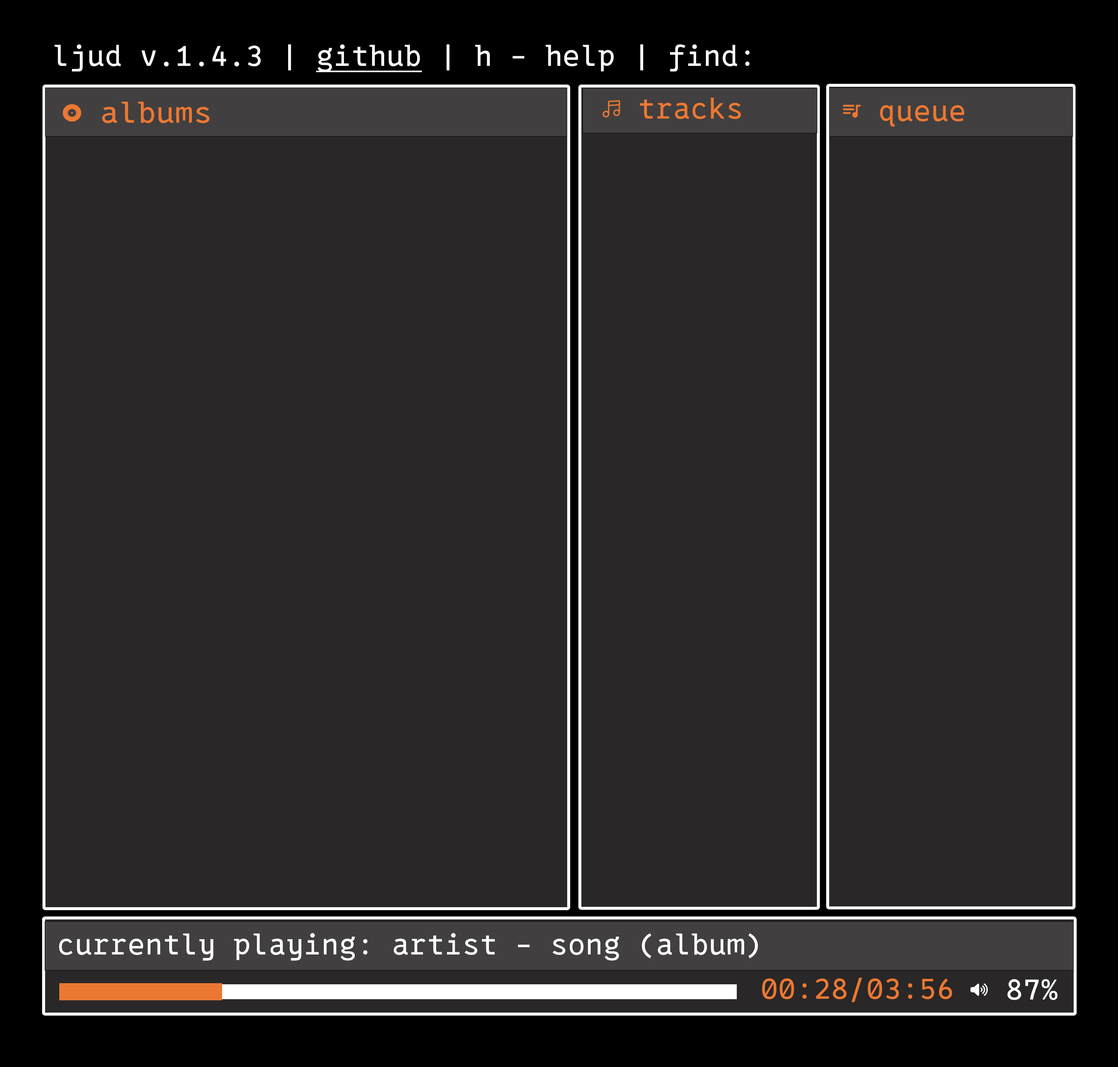
<style>
.page{position:relative;width:1118px;height:1067px;background:#292727}
.page>*{position:absolute;margin:0}
.t1{font:27.9px "0xProtoNFM-Regular";letter-spacing:0.01em;color:#ffffff}
.t2{font:27.9px "0xProtoNFM-Regular";letter-spacing:0.01em;color:#ffffff;text-decoration:underline}
.t3{font:27.9px "0xProtoNFM-Regular";letter-spacing:0.01em;color:#eb7832;scale:1.06 1}
.t4{font:27.9px "0xProtoNFM-Regular";letter-spacing:0.01em;color:#eb7832}
</style>
<div class="page">
<p class="t1" style="left:54px;top:44px;width:696px;height:28px">ljud v.1.4.3 | <span class="t2">github</span> | h - help | find:</p>
<p class="t3" style="left:63px;top:102px;width:146px;height:21px">󰀥 albums</p>
<p class="t4" style="left:843px;top:105px;width:121px;height:22px">󰲸 queue</p>
<p class="t1" style="left:59px;top:933px;width:699px;height:28px">currently playing: artist - song (album)</p>
<p class="t4" style="left:762px;top:978px;width:190px;height:24px">00:28/03:56</p>
</div>
